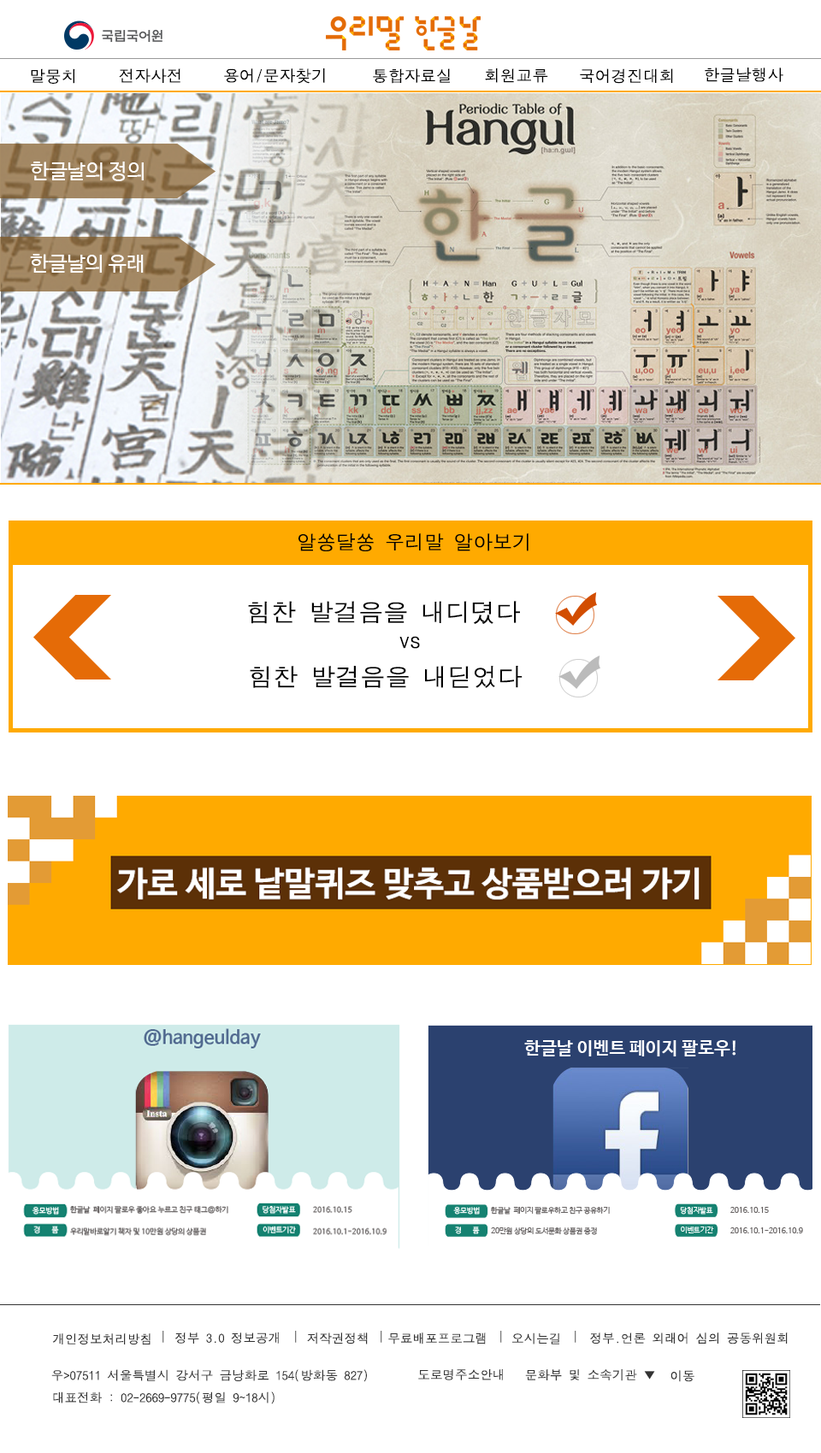
<style>
.page{position:relative;width:821px;height:1453px;background:#ffffff}
.page>*{position:absolute;margin:0}
.t1{font:16px "DotumChe";color:#000000}
.t2{font:19.6px "DotumChe";color:#000000}
.t3{font:24.9px "DotumChe";color:#000000}
.t4{font:21.4px "DotumChe";color:#000000}
.t5{font:12.5px "DotumChe";color:#333333}
.t6{font:12.5px "DotumChe"}
</style>
<div class="page">
<p class="t1" style="left:31px;top:68px;width:44px;height:16px">말뭉치</p>
<p class="t1" style="left:119px;top:68px;width:61px;height:15px">전자사전</p>
<p class="t1" style="left:224px;top:68px;width:101px;height:16px">용어/문자찾기</p>
<p class="t1" style="left:373px;top:68px;width:77px;height:16px">통합자료실</p>
<p class="t1" style="left:485px;top:68px;width:63px;height:15px">회원교류</p>
<p class="t1" style="left:580px;top:68px;width:93px;height:16px">국어경진대회</p>
<p class="t1" style="left:704px;top:68px;width:79px;height:14px">한글날행사</p>
<p class="t2" style="left:298px;top:533px;width:230px;height:18px">알쏭달쏭 우리말 알아보기</p>
<p class="t3" style="left:248px;top:601px;width:272px;height:23px">힘찬 발걸음을 내디뎠다</p>
<p class="t4" style="left:399px;top:636px;width:21px;height:13px">vs</p>
<p class="t3" style="left:250px;top:666px;width:272px;height:22px">힘찬 발걸음을 내딛었다</p>
<p class="t5" style="left:52px;top:1333px;width:98px;height:12px">개인정보처리방침</p>
<p class="t6" style="left:162px;top:1331px;width:2px;height:12px">|</p>
<p class="t5" style="left:175px;top:1332px;width:104px;height:12px">정부 3.0 정보공개</p>
<p class="t6" style="left:295px;top:1331px;width:2px;height:12px">|</p>
<p class="t5" style="left:307px;top:1333px;width:61px;height:12px">저작권정책</p>
<p class="t6" style="left:380px;top:1331px;width:2px;height:12px">|</p>
<p class="t5" style="left:388px;top:1333px;width:98px;height:12px">무료배포프로그램</p>
<p class="t6" style="left:500px;top:1331px;width:2px;height:12px">|</p>
<p class="t5" style="left:512px;top:1333px;width:47px;height:12px">오시는길</p>
<p class="t6" style="left:574px;top:1331px;width:2px;height:12px">|</p>
<p class="t5" style="left:590px;top:1333px;width:197px;height:12px">정부.언론 외래어 심의 공동위원회</p>
<p class="t5" style="left:51px;top:1369px;width:316px;height:13px">우&gt;07511 서울특별시 강서구 금낭화로 154(방화동 827)</p>
<p class="t5" style="left:418px;top:1369px;width:85px;height:11px">도로명주소안내</p>
<p class="t5" style="left:525px;top:1369px;width:130px;height:12px">문화부 및 소속기관 ▼</p>
<p class="t5" style="left:670px;top:1370px;width:24px;height:12px">이동</p>
<p class="t5" style="left:53px;top:1392px;width:221px;height:12px">대표전화 : 02-2669-9775(평일 9~18시)</p>
</div>
